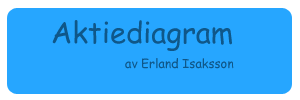
<style>
.page{position:relative;width:300px;height:100px;background:#26a6ff}
.page>*{position:absolute;margin:0}
.t1{font:29.2px "ComicSansMS";color:#0f5789}
.t2{font:12.5px "ComicSansMS";color:#0f5789}
</style>
<div class="page">
<p class="t1" style="left:52px;top:20px;width:180px;height:31px">Aktiediagram</p>
<p class="t2" style="left:125px;top:58px;width:109px;height:11px">av Erland Isaksson</p>
</div>
